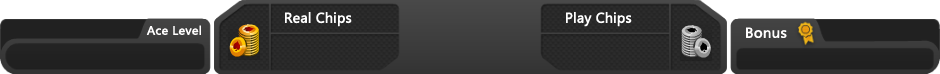
<style>
.page{position:relative;width:940px;height:74px}
.page>*{position:absolute;margin:0}
.t1{font:14px "SegoeUI";color:#ffffff;font-weight:bold}
.t2{font:12px "SegoeUI";color:#fffefe;font-weight:bold;scale:1.05 1}
.t3{font:14.1px "SegoeUI";color:#fffefe;font-weight:bold;scale:1.05 1}
</style>
<div class="page">
<p class="t1" style="left:285px;top:12px;width:67px;height:15px">Real Chips</p>
<p class="t1" style="left:566px;top:12px;width:66px;height:15px">Play Chips</p>
<p class="t2" style="left:146px;top:25px;width:55px;height:10px">Ace Level</p>
<p class="t3" style="left:746px;top:27px;width:41px;height:11px">Bonus</p>
</div>
